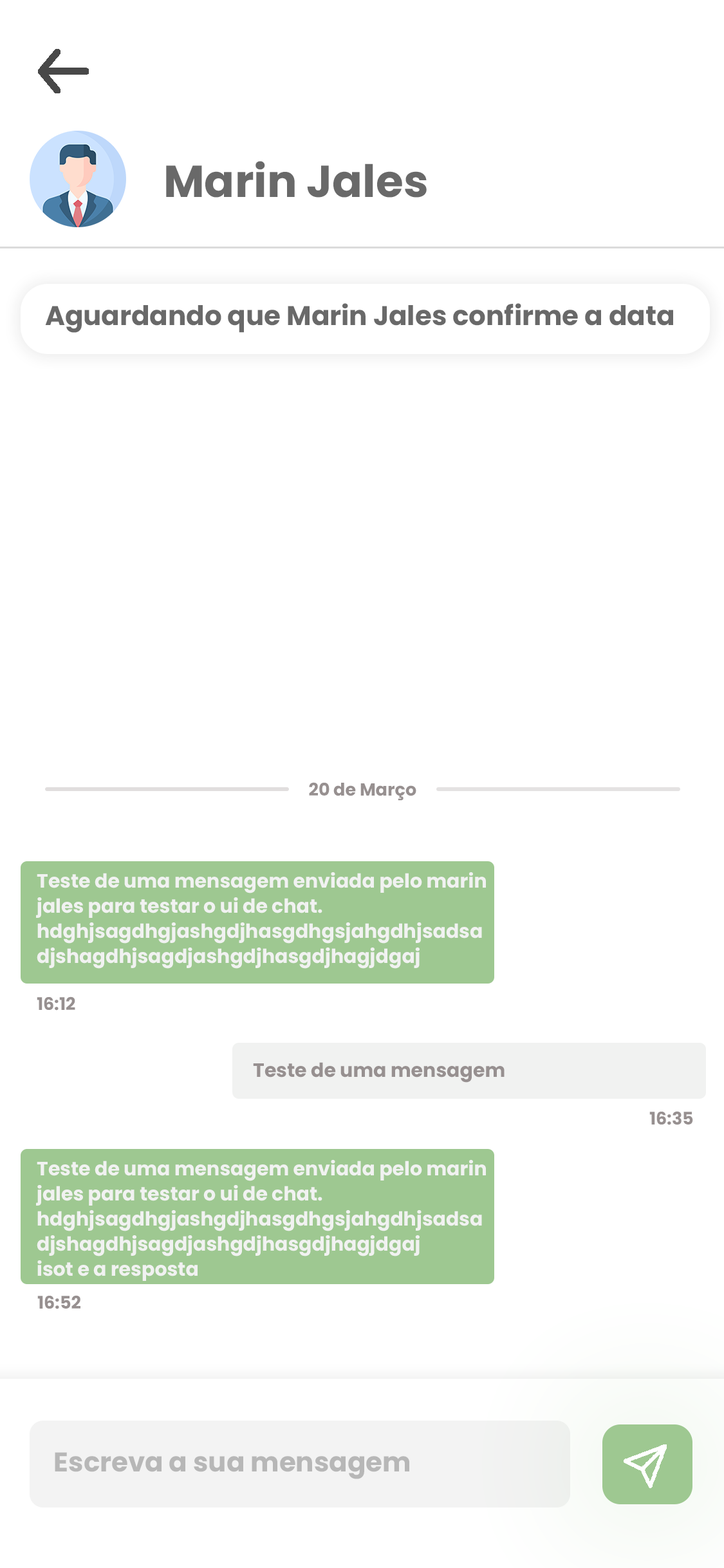
<style>
.page{position:relative;width:724px;height:1568px;background:#ffffff}
.page>*{position:absolute;margin:0}
.t1{font:44.6px "Poppins-Bold";color:#696969}
.t2{font:27px "Poppins-Bold";color:#696969}
.t3{font:17.4px "Poppins-Bold";color:#979090}
.t4{font:19.3px/25.1px "Poppins-Bold";color:#f1f2f1}
.t5{font:19.3px "Poppins-Bold";color:#979090}
.t6{font:27px "Poppins-Bold";color:#b7b7b7}
</style>
<div class="page">
<p class="t1" style="left:166px;top:161px;width:261px;height:37px">Marin Jales</p>
<p class="t2" style="left:45px;top:303px;width:628px;height:30px">Aguardando que Marin Jales confirme a data</p>
<p class="t3" style="left:309px;top:782px;width:107px;height:19px">20 de Março</p>
<p class="t4" style="left:36px;top:872px;width:450px;height:97px">Teste de uma mensagem enviada pelo marin<br>jales para testar o ui de chat.<br>hdghjsagdhgjashgdjhasgdhgsjahgdhjsadsa<br>djshagdhjsagdjashgdjhasgdjhagjdgaj</p>
<p class="t3" style="left:37px;top:996px;width:38px;height:15px">16:12</p>
<p class="t5" style="left:253px;top:1062px;width:252px;height:21px">Teste de uma mensagem</p>
<p class="t3" style="left:649px;top:1111px;width:44px;height:14px">16:35</p>
<p class="t4" style="left:36px;top:1160px;width:450px;height:121px">Teste de uma mensagem enviada pelo marin<br>jales para testar o ui de chat.<br>hdghjsagdhgjashgdjhasgdhgsjahgdhjsadsa<br>djshagdhjsagdjashgdjhasgdjhagjdgaj<br>isot e a resposta</p>
<p class="t3" style="left:37px;top:1295px;width:43px;height:14px">16:52</p>
<p class="t6" style="left:55px;top:1452px;width:354px;height:27px">Escreva a sua mensagem</p>
</div>
